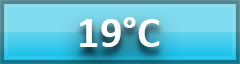
<style>
.page{position:relative;width:240px;height:64px}
.page>*{position:absolute;margin:0}
.t1{font:44.4px "Calibri-Bold";color:#ffffff}
</style>
<div class="page">
<p class="t1" style="left:80px;top:17px;width:80px;height:30px">19°C</p>
</div>
